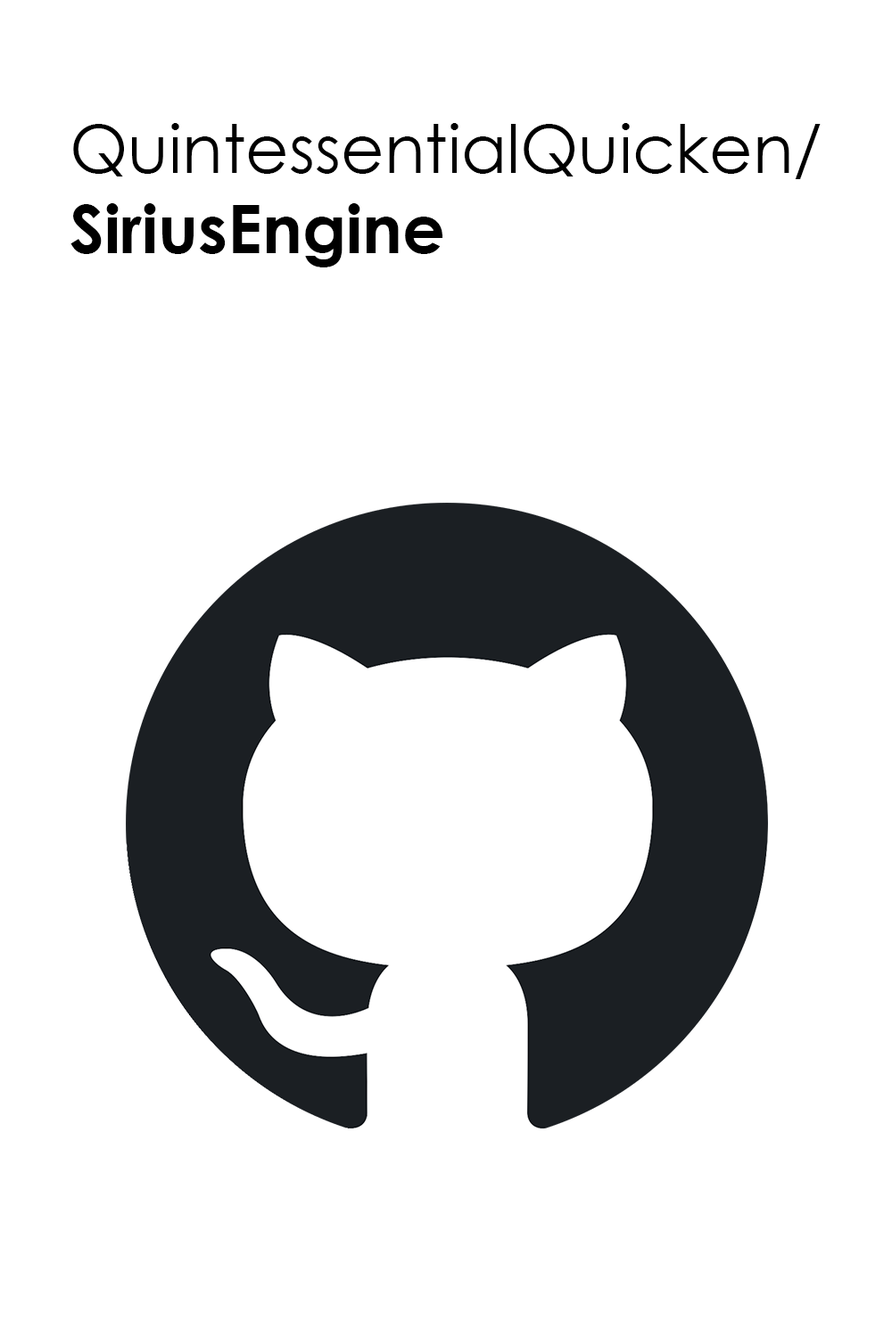
<style>
.page{position:relative;width:892px;height:1337px;background:#ffffff}
.page>*{position:absolute;margin:0}
.t1{font:66.8px "CenturyGothic";color:#000000}
.t2{font:66.8px "CenturyGothic-Bold";color:#000000}
</style>
<div class="page">
<p class="t1" style="left:70px;top:123px;width:750px;height:144px">QuintessentialQuicken/<br><span class="t2">SiriusEngine</span></p>
</div>
